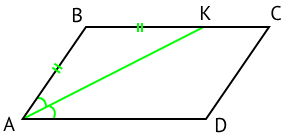
<style>
.page{position:relative;width:286px;height:138px;background:#ffffff}
.page>*{position:absolute;margin:0}
.t1{font:20px "PTSans-Regular";color:#000000}
</style>
<div class="page">
<p class="t1" style="left:200px;top:6px;width:11px;height:14px">K</p>
<p class="t1" style="left:271px;top:5px;width:10px;height:16px">C</p>
<p class="t1" style="left:72px;top:7px;width:10px;height:16px">B</p>
<p class="t1" style="left:3px;top:116px;width:12px;height:15px">A</p>
<p class="t1" style="left:215px;top:117px;width:12px;height:16px">D</p>
</div>
